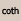
<style>
.page{position:relative;width:21px;height:21px;background:#d9cdc1}
.page>*{position:absolute;margin:0}
.t1{font:9px "Tahoma";color:#000000}
</style>
<div class="page">
<p class="t1" style="left:2px;top:7px;width:17px;height:8px">coth</p>
</div>
